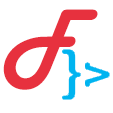
<style>
.page{position:relative;width:113px;height:113px;background:#ffffff}
.page>*{position:absolute;margin:0}
.t1{font:90px "HarlowSolid";color:#e7313e}
</style>
<div class="page">
<p class="t1" style="left:3px;top:9px;width:95px;height:81px">F</p>
</div>
